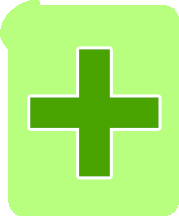
<style>
.page{position:relative;width:179px;height:216px;background:#b8ff7f}
.page>*{position:absolute;margin:0}
.t1{font:363.9px "Futura-CondensedMedium";color:#49a300}
</style>
<div class="page">
<p class="t1" style="left:30px;top:49px;width:129px;height:128px">+</p>
</div>
